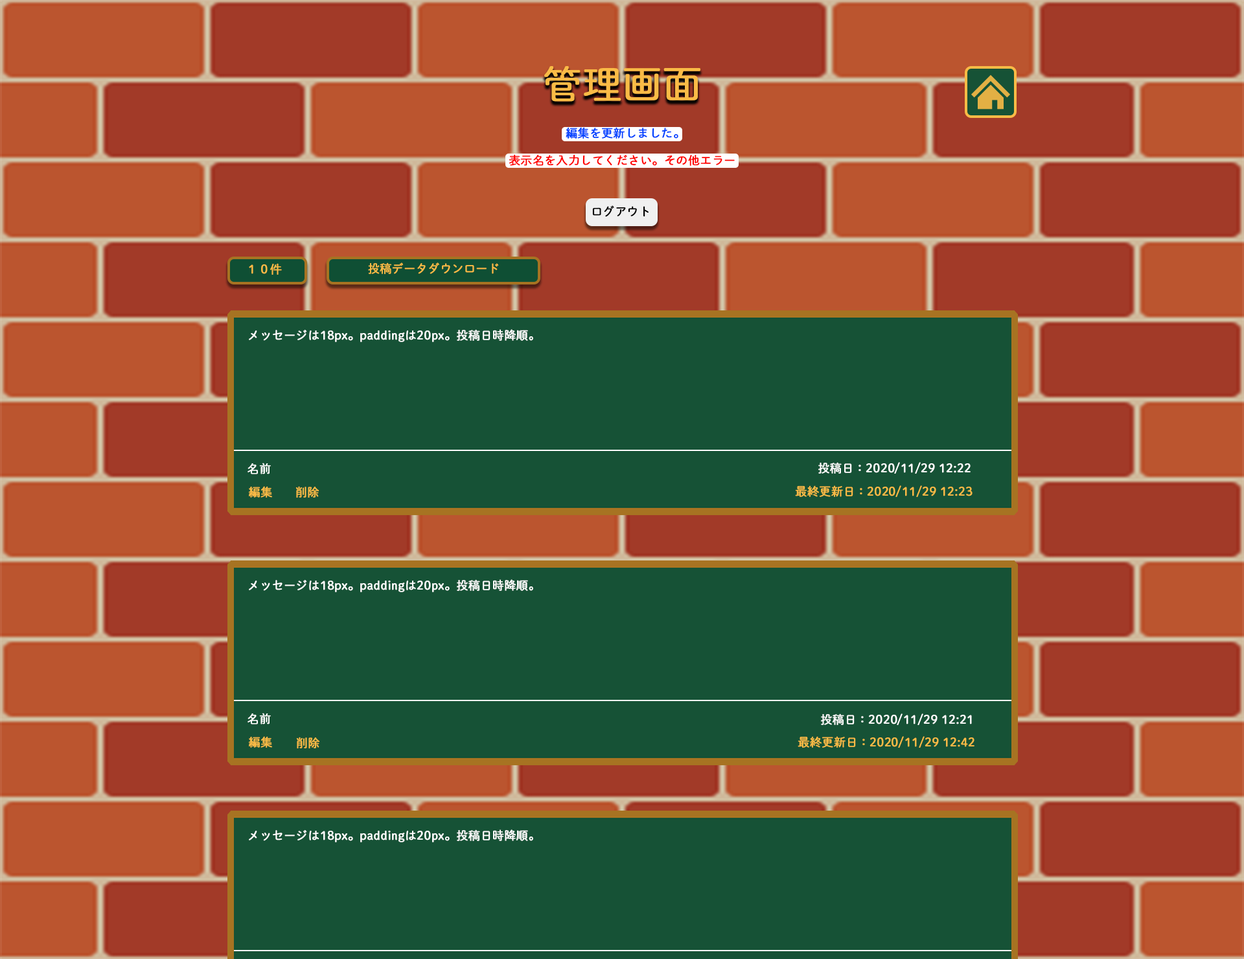
<style>
.page{position:relative;width:1244px;height:959px;background:#165236}
.page>*{position:absolute;margin:0}
.t1{font:38.9px "DNPShueiMGoStd-L";color:#fabb46;font-weight:bold}
.t2{font:11.7px "DNPShueiMGoStd-L";color:#0042ff;font-weight:bold}
.t3{font:11.7px "DNPShueiMGoStd-L";color:#ff0000;font-weight:bold}
.t4{font:11.7px "DNPShueiMGoStd-L";color:#000000;font-weight:bold}
.t5{font:11.7px "DNPShueiMGoStd-L";color:#fabb46;font-weight:bold}
.t6{font:11.7px "DNPShueiMGoStd-L";color:#ffffff;font-weight:bold}
</style>
<div class="page">
<p class="t1" style="left:544px;top:66px;width:156px;height:36px">管理画面</p>
<p class="t2" style="left:566px;top:127px;width:112px;height:12px">編集を更新しました。</p>
<p class="t3" style="left:509px;top:154px;width:226px;height:12px">表示名を入力してください。その他エラー</p>
<p class="t4" style="left:592px;top:205px;width:56px;height:12px">ログアウト</p>
<p class="t5" style="left:249px;top:263px;width:33px;height:12px">１０件</p>
<p class="t5" style="left:368px;top:262px;width:131px;height:12px">投稿データダウンロード</p>
<p class="t6" style="left:249px;top:329px;width:284px;height:13px">メッセージは18px。paddingは20px。投稿日時降順。</p>
<p class="t6" style="left:818px;top:462px;width:152px;height:12px">投稿日：2020/11/29 12:22</p>
<p class="t6" style="left:247px;top:463px;width:24px;height:11px">名前</p>
<p class="t5" style="left:248px;top:486px;width:24px;height:12px">編集</p>
<p class="t5" style="left:295px;top:486px;width:24px;height:12px">削除</p>
<p class="t5" style="left:795px;top:485px;width:177px;height:12px">最終更新日：2020/11/29 12:23</p>
<p class="t6" style="left:249px;top:579px;width:284px;height:13px">メッセージは18px。paddingは20px。投稿日時降順。</p>
<p class="t6" style="left:247px;top:713px;width:24px;height:11px">名前</p>
<p class="t6" style="left:821px;top:713px;width:151px;height:12px">投稿日：2020/11/29 12:21</p>
<p class="t5" style="left:248px;top:736px;width:24px;height:12px">編集</p>
<p class="t5" style="left:296px;top:737px;width:24px;height:11px">削除</p>
<p class="t5" style="left:797px;top:736px;width:177px;height:12px">最終更新日：2020/11/29 12:42</p>
<p class="t6" style="left:249px;top:829px;width:284px;height:13px">メッセージは18px。paddingは20px。投稿日時降順。</p>
</div>
